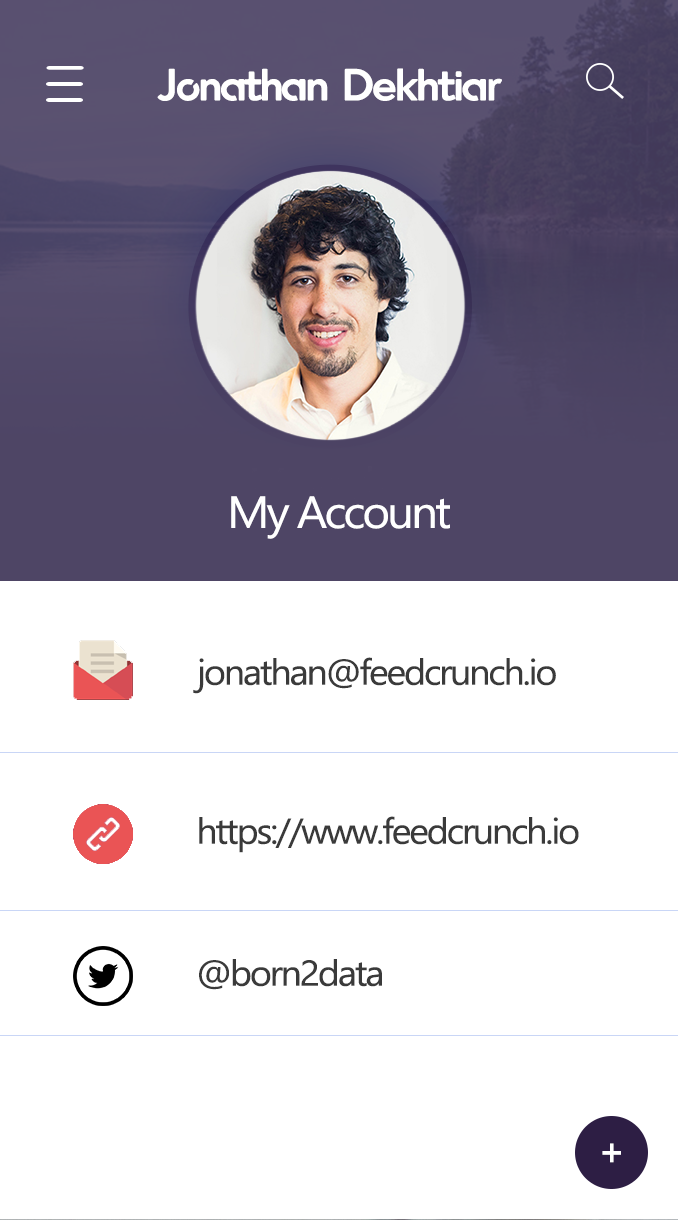
<style>
.page{position:relative;width:678px;height:1220px;background:#ffffff}
.page>*{position:absolute;margin:0}
.t1{font:45px "Enso";letter-spacing:-0.06em;color:#ffffff;scale:1.05 1}
.t2{font:45px "Ebrima";letter-spacing:-0.06em;color:#ffffff;scale:1.05 1}
.t3{font:36px "Ebrima";letter-spacing:-0.06em;color:#3a3a3a;scale:1.05 1}
</style>
<div class="page">
<p class="t1" style="left:157px;top:68px;width:345px;height:33px">Jonathan Dekhtiar</p>
<p class="t2" style="left:231px;top:496px;width:219px;height:43px">My Account</p>
<p class="t3" style="left:193px;top:657px;width:363px;height:37px">jonathan@feedcrunch.io</p>
<p class="t3" style="left:199px;top:816px;width:380px;height:37px">https://www.feedcrunch.io</p>
<p class="t3" style="left:199px;top:959px;width:183px;height:31px">@born2data</p>
</div>
